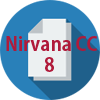
<style>
.page{position:relative;width:100px;height:100px;background:#2980b9}
.page>*{position:absolute;margin:0}
.t1{font:18.4px "AdobeGothicStd-Bold";color:#b01a3a}
</style>
<div class="page">
<p class="t1" style="left:6px;top:36px;width:91px;height:15px">Nirvana CC</p>
<p class="t1" style="left:45px;top:57px;width:9px;height:15px">8</p>
</div>
